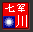
<style>
.page{position:relative;width:33px;height:32px;background:#f20000}
.page>*{position:absolute;margin:0}
.t1{font:10.4px "SimSun";color:#ffffff}
.t2{font:11.7px "SimSun";color:#ffffff}
</style>
<div class="page">
<p class="t1" style="left:5px;top:4px;width:20px;height:8px">七军</p>
<p class="t2" style="left:16px;top:15px;width:11px;height:12px">川</p>
</div>
